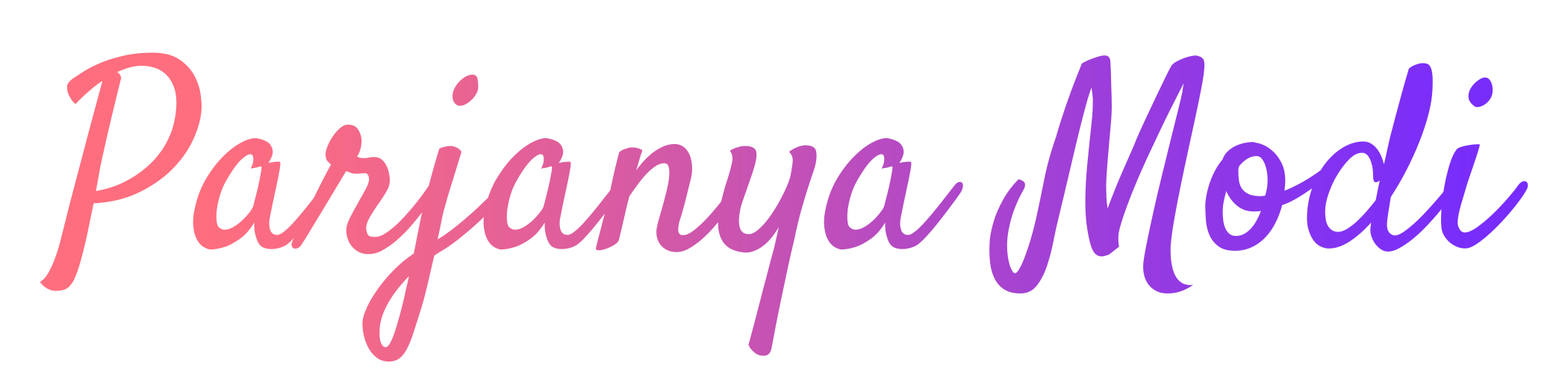
<style>
.page{position:relative;width:1568px;height:392px;background:#ffffff}
.page>*{position:absolute;margin:0}
.t1{font:261.3px "Satisfy-Regular"}
</style>
<div class="page">
<p class="t1" style="left:40px;top:52px;width:1488px;height:310px">Parjanya Modi</p>
</div>
